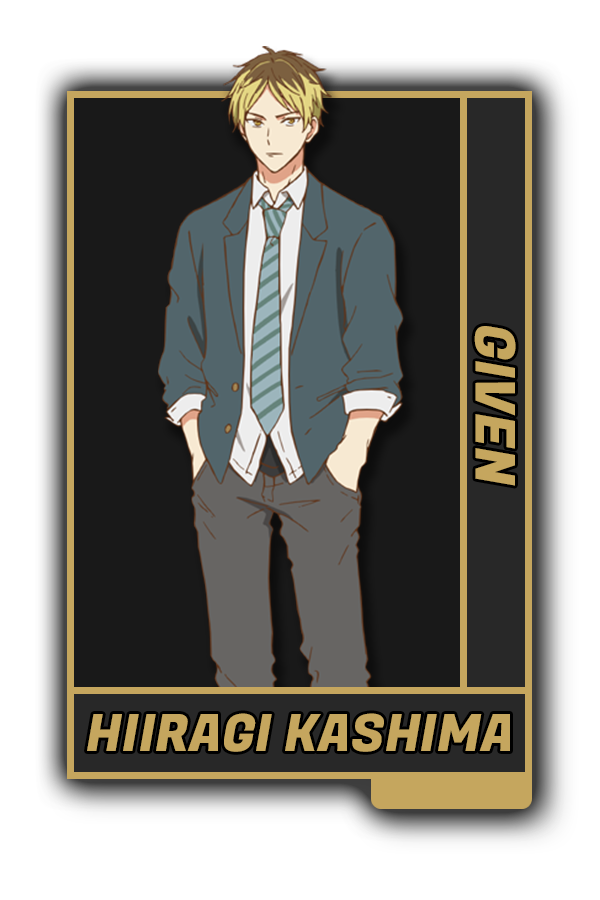
<style>
.page{position:relative;width:600px;height:900px;background:#ffffff}
.page>*{position:absolute;margin:0}
.t1{font:54.9px "FugazOne-Regular";color:#c5a65e}
.t2{font:51.5px "FugazOne-Regular";color:#c5a65e}
</style>
<div class="page">
<p class="t1" style="left:474px;top:326px;width:42px;height:160px;rotate:90deg">GIVEN</p>
<p class="t2" style="left:87px;top:713px;width:423px;height:39px">HIIRAGI KASHIMA</p>
</div>
